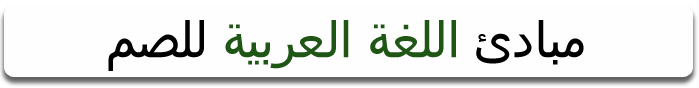
<style>
.page{position:relative;width:699px;height:88px;background:#fefefe}
.page>*{position:absolute;margin:0}
.t1{font:52px "ArialUnicodeMS";color:#1f5616}
.t2{font:52px "ArialUnicodeMS";color:#000000}
</style>
<div class="page">
<p class="t1" style="left:108px;top:20px;width:476px;height:51px"><span class="t2">مبادئ </span>اللغة العربية<span class="t2"> للصم</span></p>
</div>
